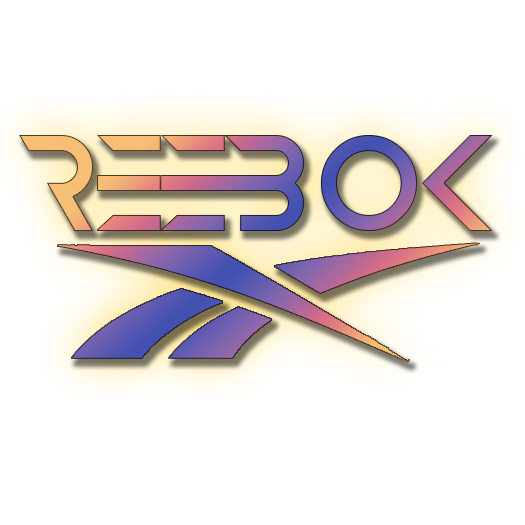
<style>
.page{position:relative;width:525px;height:525px;background:#ffffff}
.page>*{position:absolute;margin:0}
.t1{font:119.6px "Anurati-Regular"}
</style>
<div class="page">
<p class="t1" style="left:19px;top:135px;width:474px;height:96px">REEBOK</p>
</div>
